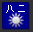
<style>
.page{position:relative;width:33px;height:32px;background:#000090}
.page>*{position:absolute;margin:0}
.t1{font:10.4px "SimSun";color:#ffffff}
</style>
<div class="page">
<p class="t1" style="left:6px;top:5px;width:19px;height:8px">八二</p>
</div>
